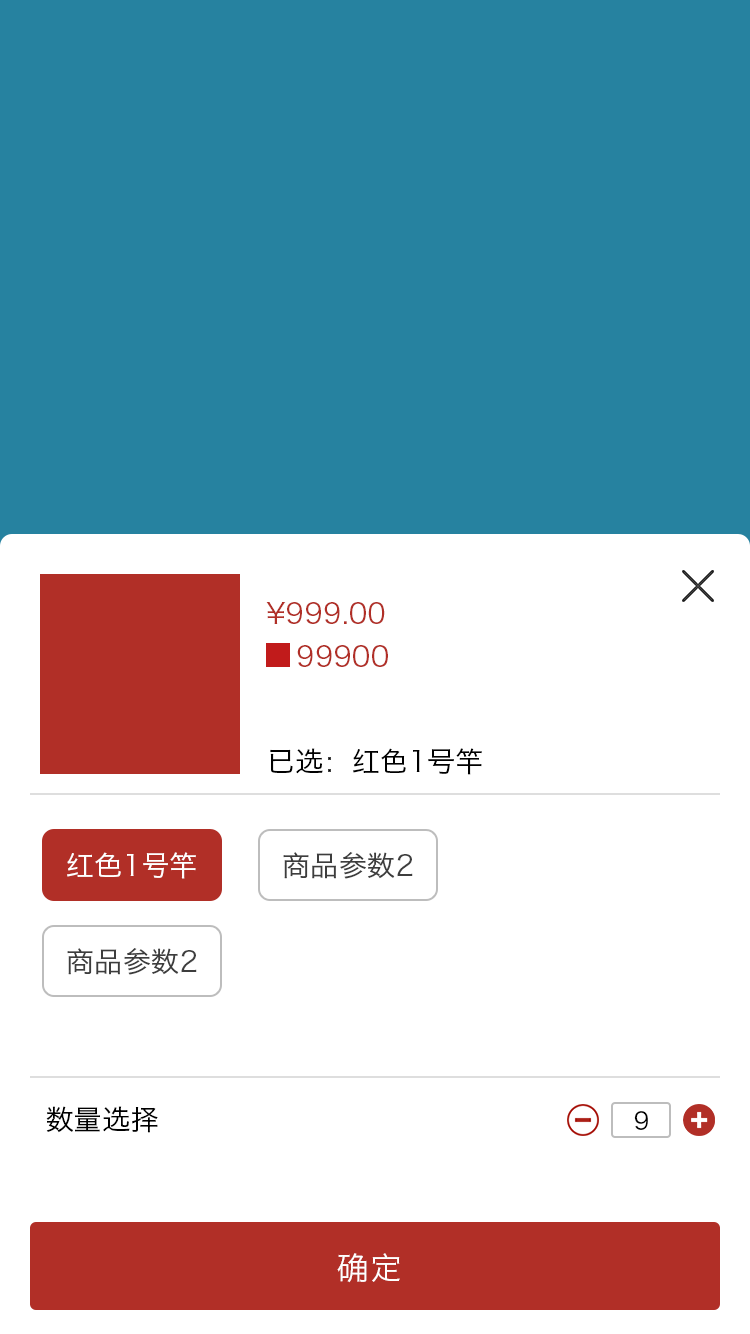
<style>
.page{position:relative;width:750px;height:1334px;background:#ffffff}
.page>*{position:absolute;margin:0}
.t1{font:28px "HiraginoSansGB-W3";color:#b12f27}
.t2{font:28px "HiraginoSansGB-W3";color:#000000}
.t3{font:28px "HiraginoSansGB-W3";color:#ffffff}
.t4{font:28px "HiraginoSansGB-W3";color:#3d3d3d}
.t5{font:24px "HiraginoSansGB-W3";color:#000000}
.t6{font:32px "HiraginoSansGB-W3";color:#ffffff}
</style>
<div class="page">
<p class="t1" style="left:266px;top:602px;width:119px;height:22px">¥999.00</p>
<p class="t1" style="left:297px;top:645px;width:91px;height:22px">99900</p>
<p class="t2" style="left:270px;top:748px;width:212px;height:27px">已选：红色1号竿</p>
<p class="t3" style="left:67px;top:852px;width:129px;height:27px">红色1号竿</p>
<p class="t4" style="left:283px;top:852px;width:130px;height:27px">商品参数2</p>
<p class="t4" style="left:67px;top:948px;width:130px;height:27px">商品参数2</p>
<p class="t2" style="left:46px;top:1106px;width:112px;height:27px">数量选择</p>
<p class="t5" style="left:634px;top:1111px;width:14px;height:19px">9</p>
<p class="t6" style="left:337px;top:1253px;width:63px;height:30px">确定</p>
</div>
